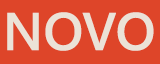
<style>
.page{position:relative;width:160px;height:64px;background:#de4529}
.page>*{position:absolute;margin:0}
.t1{font:53px "YuGothicUI-Bold";color:#ebe2d7}
</style>
<div class="page">
<p class="t1" style="left:7px;top:12px;width:147px;height:39px">NOVO</p>
</div>
